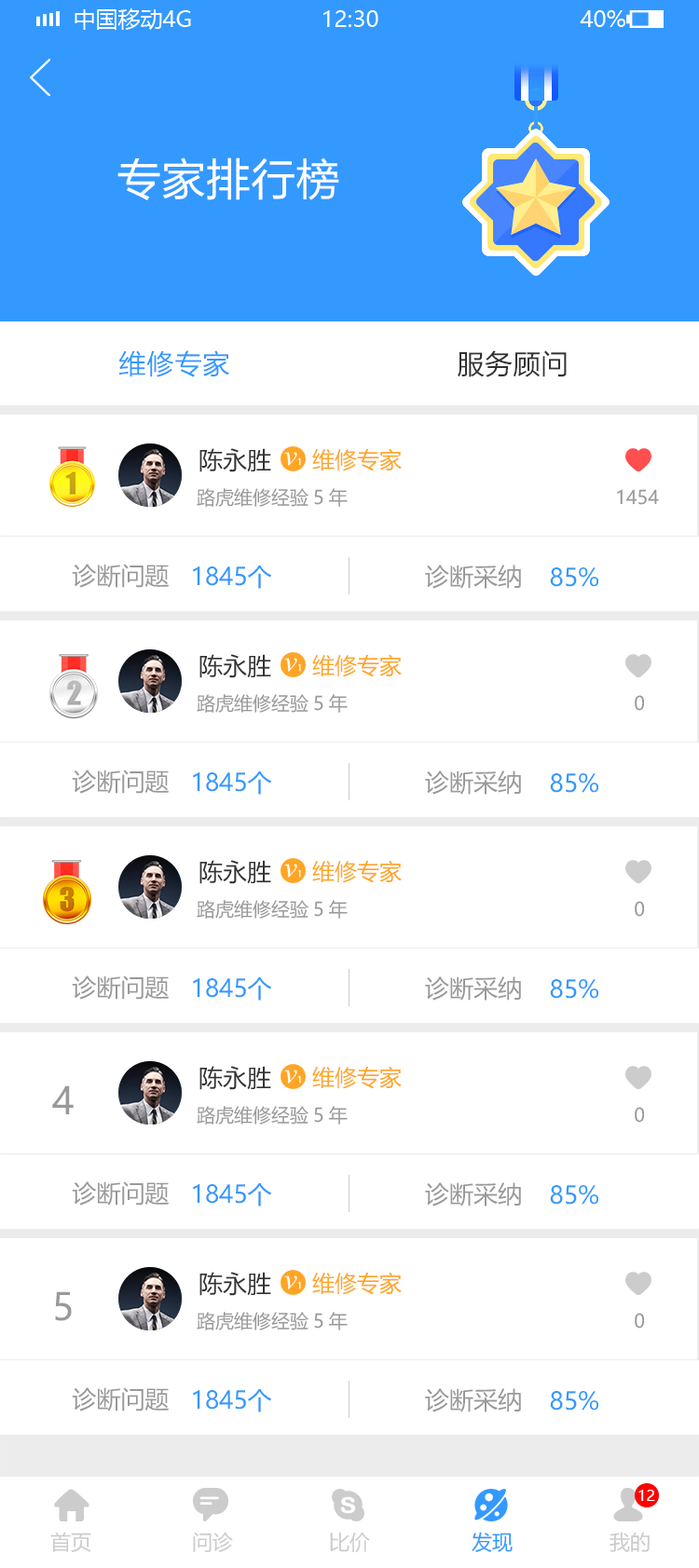
<style>
.page{position:relative;width:699px;height:1568px;background:#ffffff}
.page>*{position:absolute;margin:0}
.t1{font:44.7px "FZLTHK--GBK1-0";color:#ffffff}
.t2{font:28px "FZLTHK--GBK1-0";color:#3399ff}
.t3{font:28px "FZLTHK--GBK1-0";color:#333333}
.t4{font:24.2px "MicrosoftYaHei";color:#333333}
.t5{font:22.4px "MicrosoftYaHei";color:#ffa525}
.t6{font:18.6px "MicrosoftYaHei";color:#999999}
.t7{font:24.2px "MicrosoftYaHei";color:#999999}
.t8{font:24.2px "MicrosoftYaHei";color:#3399ff}
.t9{font:37.3px "MicrosoftYaHei";color:#999999}
.t10{font:14.9px "MicrosoftYaHei";color:#ffffff}
.t11{font:20.5px "MicrosoftYaHei";color:#cccccc}
.t12{font:20.5px "MicrosoftYaHei";color:#3399ff}
</style>
<div class="page">
<p class="t1" style="left:117px;top:157px;width:222px;height:43px">专家排行榜</p>
<p class="t2" style="left:118px;top:350px;width:111px;height:27px">维修专家</p>
<p class="t3" style="left:457px;top:350px;width:109px;height:27px">服务顾问</p>
<p class="t4" style="left:199px;top:448px;width:72px;height:24px">陈永胜</p>
<p class="t5" style="left:312px;top:448px;width:90px;height:23px">维修专家</p>
<p class="t6" style="left:197px;top:488px;width:151px;height:19px">路虎维修经验5年</p>
<p class="t6" style="left:617px;top:489px;width:42px;height:16px">1454</p>
<p class="t7" style="left:72px;top:564px;width:97px;height:24px">诊断问题</p>
<p class="t8" style="left:193px;top:566px;width:78px;height:23px">1845个</p>
<p class="t7" style="left:425px;top:565px;width:96px;height:24px">诊断采纳</p>
<p class="t8" style="left:550px;top:567px;width:48px;height:20px">85%</p>
<p class="t4" style="left:199px;top:654px;width:72px;height:24px">陈永胜</p>
<p class="t5" style="left:312px;top:654px;width:90px;height:23px">维修专家</p>
<p class="t6" style="left:197px;top:694px;width:151px;height:19px">路虎维修经验5年</p>
<p class="t6" style="left:634px;top:695px;width:11px;height:16px">0</p>
<p class="t7" style="left:72px;top:770px;width:97px;height:24px">诊断问题</p>
<p class="t8" style="left:193px;top:771px;width:78px;height:24px">1845个</p>
<p class="t7" style="left:425px;top:770px;width:96px;height:25px">诊断采纳</p>
<p class="t8" style="left:550px;top:773px;width:48px;height:20px">85%</p>
<p class="t4" style="left:199px;top:860px;width:72px;height:24px">陈永胜</p>
<p class="t5" style="left:312px;top:860px;width:90px;height:23px">维修专家</p>
<p class="t6" style="left:197px;top:900px;width:151px;height:19px">路虎维修经验5年</p>
<p class="t6" style="left:634px;top:901px;width:11px;height:16px">0</p>
<p class="t7" style="left:72px;top:975px;width:97px;height:25px">诊断问题</p>
<p class="t8" style="left:193px;top:977px;width:78px;height:24px">1845个</p>
<p class="t7" style="left:425px;top:976px;width:96px;height:25px">诊断采纳</p>
<p class="t8" style="left:550px;top:979px;width:48px;height:20px">85%</p>
<p class="t4" style="left:199px;top:1066px;width:72px;height:24px">陈永胜</p>
<p class="t5" style="left:312px;top:1066px;width:90px;height:23px">维修专家</p>
<p class="t9" style="left:52px;top:1085px;width:22px;height:29px">4</p>
<p class="t6" style="left:197px;top:1106px;width:151px;height:19px">路虎维修经验5年</p>
<p class="t6" style="left:634px;top:1107px;width:11px;height:16px">0</p>
<p class="t7" style="left:72px;top:1181px;width:97px;height:25px">诊断问题</p>
<p class="t8" style="left:193px;top:1183px;width:78px;height:24px">1845个</p>
<p class="t7" style="left:425px;top:1182px;width:96px;height:25px">诊断采纳</p>
<p class="t8" style="left:550px;top:1185px;width:48px;height:20px">85%</p>
<p class="t4" style="left:199px;top:1272px;width:72px;height:24px">陈永胜</p>
<p class="t5" style="left:312px;top:1272px;width:90px;height:23px">维修专家</p>
<p class="t9" style="left:55px;top:1291px;width:17px;height:30px">5</p>
<p class="t6" style="left:197px;top:1312px;width:151px;height:18px">路虎维修经验5年</p>
<p class="t6" style="left:634px;top:1313px;width:11px;height:16px">0</p>
<p class="t7" style="left:72px;top:1387px;width:97px;height:24px">诊断问题</p>
<p class="t8" style="left:193px;top:1389px;width:78px;height:23px">1845个</p>
<p class="t7" style="left:425px;top:1388px;width:96px;height:24px">诊断采纳</p>
<p class="t8" style="left:550px;top:1391px;width:48px;height:20px">85%</p>
<p class="t10" style="left:638px;top:1490px;width:17px;height:11px">12</p>
<p class="t11" style="left:50px;top:1532px;width:41px;height:20px">首页</p>
<p class="t11" style="left:193px;top:1532px;width:40px;height:20px">问诊</p>
<p class="t11" style="left:330px;top:1532px;width:40px;height:20px">比价</p>
<p class="t12" style="left:471px;top:1532px;width:41px;height:20px">发现</p>
<p class="t11" style="left:609px;top:1532px;width:40px;height:20px">我的</p>
</div>
